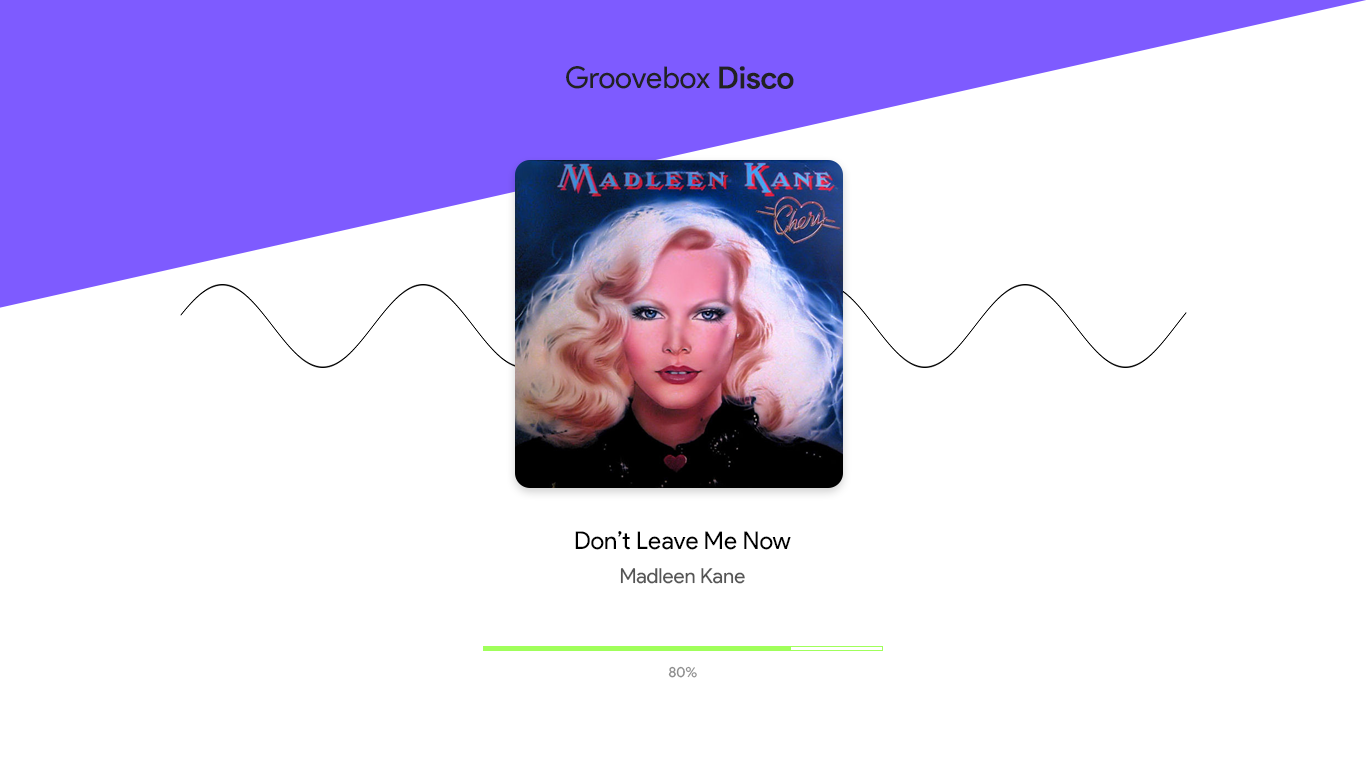
<style>
.page{position:relative;width:1366px;height:768px;background:#ffffff}
.page>*{position:absolute;margin:0}
.t1{font:30px "ProductSans-Regular";color:#222222}
.t2{font:30px "ProductSans-Regular";color:#222222;font-weight:bold}
.t3{font:24.4px "ProductSans-Regular";color:#000000}
.t4{font:20.5px "ProductSans-Regular";color:#555555}
.t5{font:14.4px "ProductSans-Regular";color:#8d8d8d}
</style>
<div class="page">
<p class="t1" style="left:566px;top:66px;width:228px;height:23px">Groovebox <span class="t2">Disco</span></p>
<p class="t3" style="left:575px;top:531px;width:216px;height:19px">Don’t Leave Me Now</p>
<p class="t4" style="left:620px;top:568px;width:125px;height:16px">Madleen Kane</p>
<p class="t5" style="left:668px;top:666px;width:29px;height:12px">80%</p>
</div>
